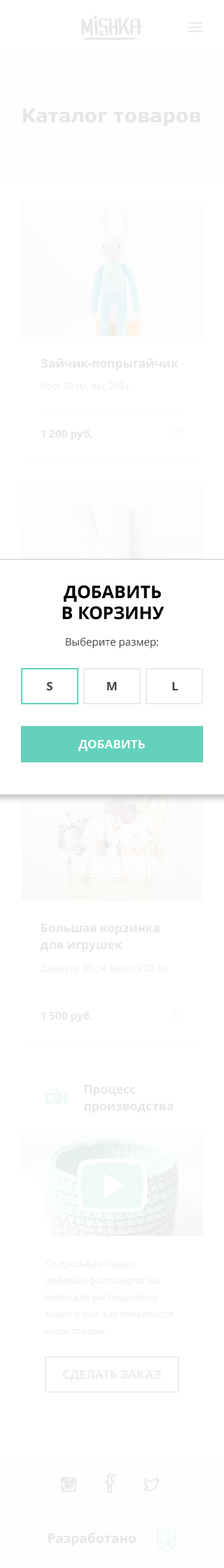
<style>
.page{position:relative;width:224px;height:1568px;background:#ffffff}
.page>*{position:absolute;margin:0}
.t1{font:18.9px "Verdana-Bold";color:#e6e6e6}
.t2{font:11.9px "OpenSans-Bold";color:#e6e6e6}
.t3{font:9.1px "OpenSans";color:#ededed}
.t4{font:10.5px "OpenSans-Bold";color:#e6e6e6}
.t5{font:17.5px/21px "OpenSans-Bold";color:#000000;text-transform:uppercase}
.t6{font:10.5px "OpenSans";color:#444444}
.t7{font:11.9px "OpenSans-Bold";color:#444444;text-transform:uppercase}
.t8{font:11.9px "OpenSans-Bold";color:#ffffff;text-transform:uppercase}
.t9{font:11.9px/16.8px "OpenSans-Bold";color:#e6e6e6}
.t10{font:9.1px/16.8px "OpenSans";color:#ededed}
.t11{font:11.9px "OpenSans-Bold";color:#ededed;text-transform:uppercase}
.t12{font:13.3px "OpenSans-Bold";color:#e6e6e6}
</style>
<div class="page">
<p class="t1" style="left:23px;top:108px;width:178px;height:18px">Каталог товаров</p>
<p class="t2" style="left:41px;top:358px;width:137px;height:12px">Зайчик-попрыгайчик</p>
<p class="t3" style="left:41px;top:382px;width:89px;height:9px">Рост 30 см, вес 200 г</p>
<p class="t4" style="left:41px;top:429px;width:51px;height:11px">1 200 руб.</p>
<p class="t5" style="left:62px;top:585px;width:102px;height:35px;text-align:center">Добавить <br>в корзину</p>
<p class="t6" style="left:66px;top:637px;width:92px;height:11px">Выберите размер:</p>
<p class="t7" style="left:47px;top:682px;width:5px;height:8px">S</p>
<p class="t7" style="left:107px;top:682px;width:10px;height:8px">M</p>
<p class="t7" style="left:172px;top:682px;width:5px;height:8px">L</p>
<p class="t8" style="left:78px;top:740px;width:67px;height:11px">Добавить</p>
<p class="t9" style="left:41px;top:923px;width:118px;height:29px">Большая корзинка<br>для игрушек</p>
<p class="t3" style="left:40px;top:964px;width:127px;height:9px">Диаметр 30 см, высота 30 см</p>
<p class="t4" style="left:41px;top:1011px;width:51px;height:11px">1 500 руб.</p>
<p class="t9" style="left:85px;top:1084px;width:88px;height:29px">Процесс<br>производства</p>
<p class="t10" style="left:45px;top:1260px;width:128px;height:76px">По просьбам наших любимых фолловеров мы сняли для вас подробное видео о том, как появляются наши товары.</p>
<p class="t11" style="left:63px;top:1370px;width:98px;height:11px">СДелать заказ</p>
<p class="t12" style="left:48px;top:1532px;width:88px;height:14px">Разработано</p>
</div>
